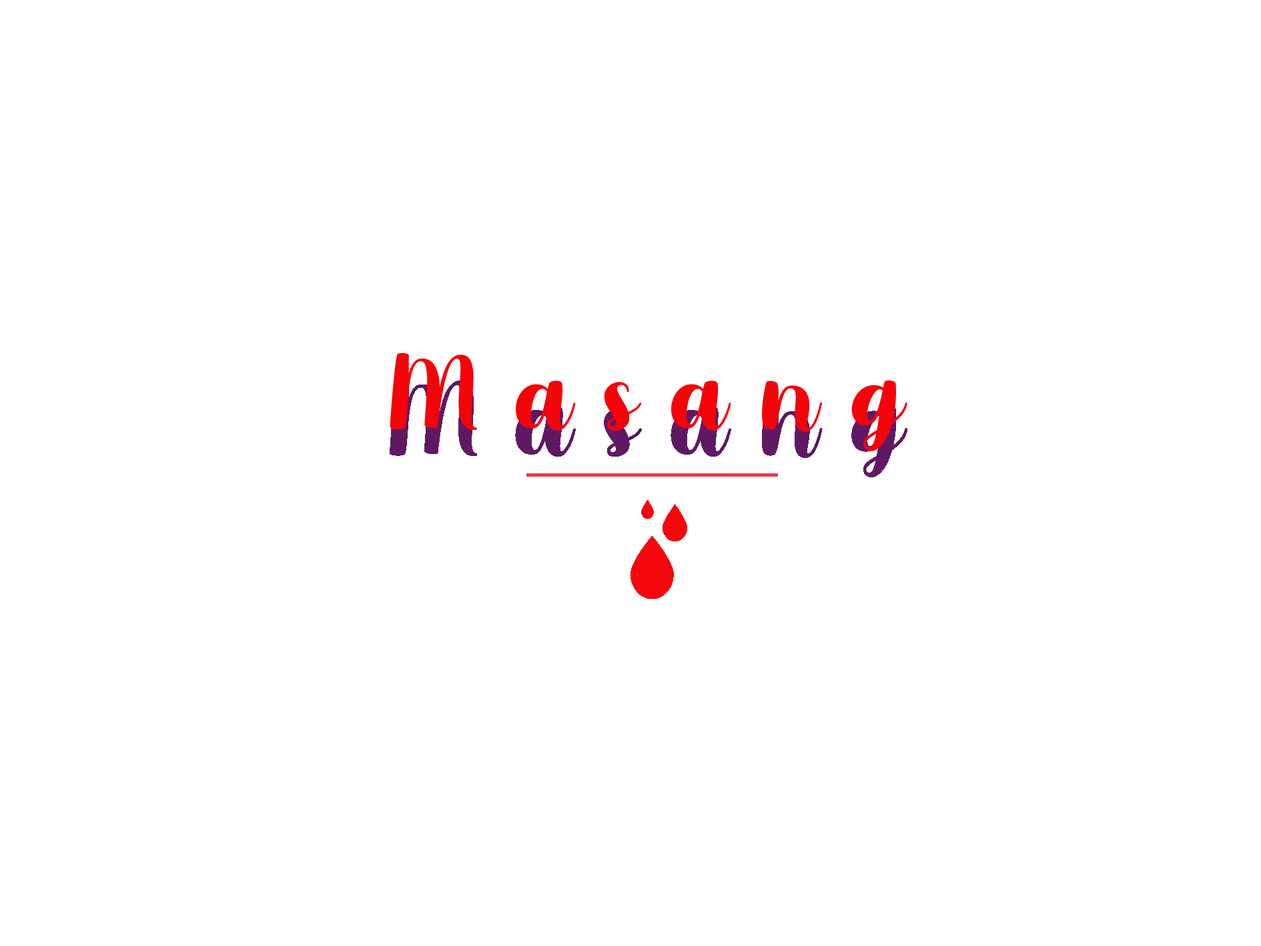
<style>
.page{position:relative;width:1261px;height:946px;background:#ffffff}
.page>*{position:absolute;margin:0}
.t1{font:127.9px "MoonbrightDemo";color:#f40309}
</style>
<div class="page">
<p class="t1" style="left:390px;top:352px;width:517px;height:99px">M a s a n g</p>
</div>
